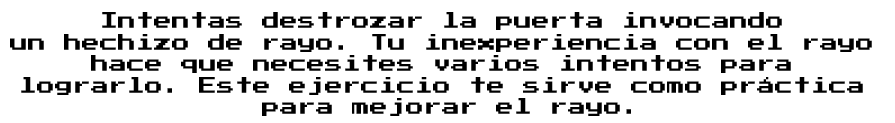
<style>
.page{position:relative;width:895px;height:123px;background:#ffffff}
.page>*{position:absolute;margin:0}
.t1{font:18px "PressStart2P";color:#000000}
</style>
<div class="page">
<p class="t1" style="left:10px;top:12px;width:862px;height:104px;text-align:center">Intentas destrozar la puerta invocando <br>un hechizo de rayo. Tu inexperiencia con el rayo <br>hace que necesites varios intentos para <br>lograrlo. Este ejercicio te sirve como práctica <br>para mejorar el rayo.</p>
</div>
